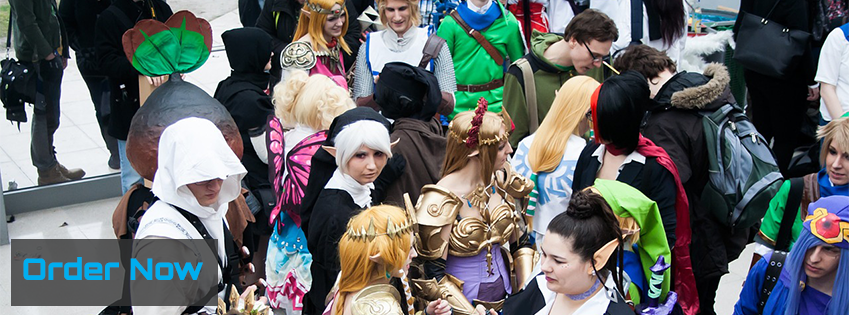
<style>
.page{position:relative;width:850px;height:315px}
.page>*{position:absolute;margin:0}
.t1{font:30px "Orbitron-Black";color:#00aeef}
</style>
<div class="page">
<p class="t1" style="left:23px;top:257px;width:180px;height:23px">Order Now</p>
</div>
